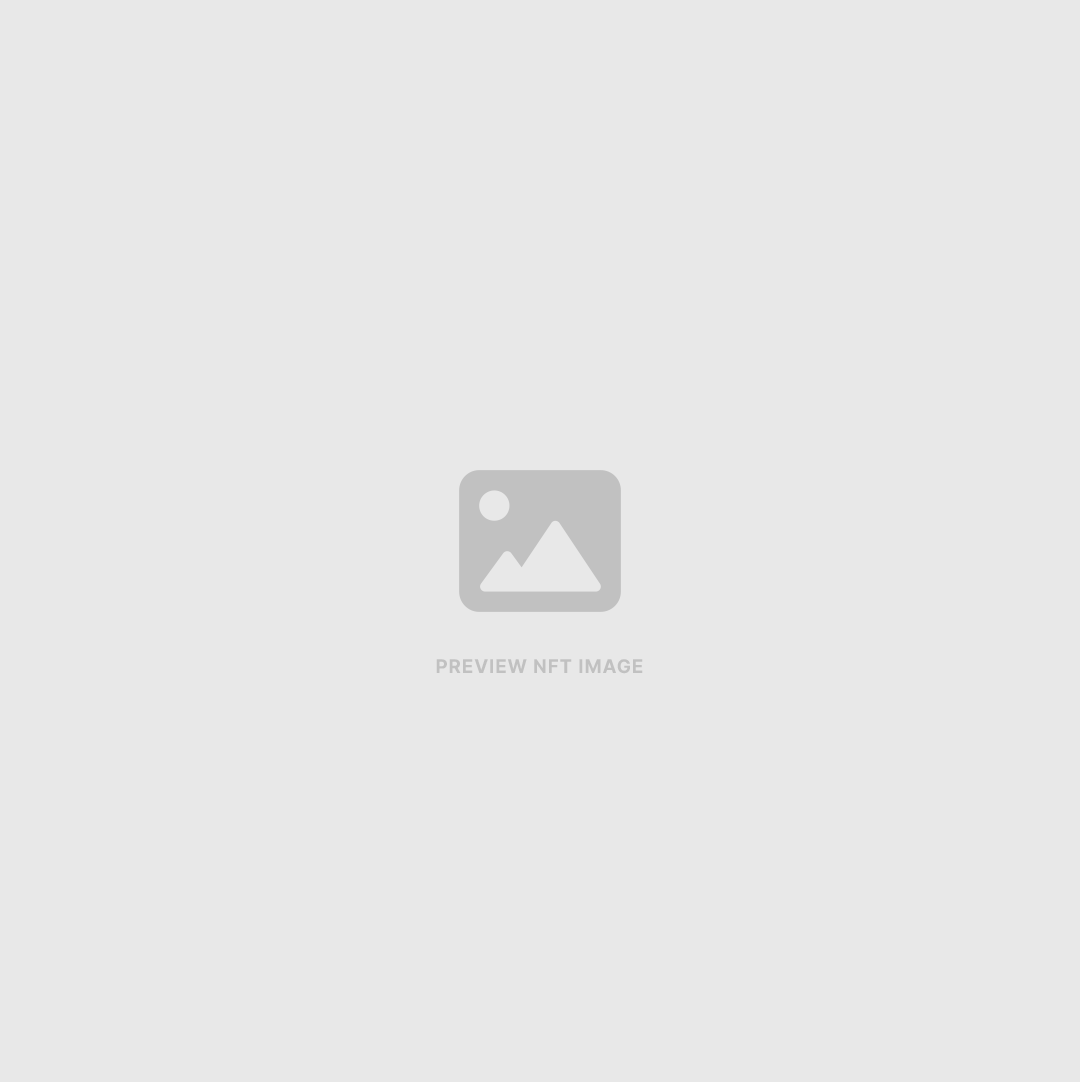
<style>
.page{position:relative;width:1080px;height:1082px;background:#e8e8e8}
.page>*{position:absolute;margin:0}
.t1{font:18.7px "Inter-Bold";letter-spacing:0.05em;color:#c1c1c1;text-transform:uppercase}
</style>
<div class="page">
<p class="t1" style="left:436px;top:659px;width:207px;height:15px">PREVIEW NFT IMAGE</p>
</div>
